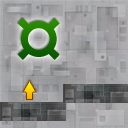
<style>
.page{position:relative;width:128px;height:128px}
.page>*{position:absolute;margin:0}
.t1{font:82px "TrebuchetMS-Bold";color:#187f00}
</style>
<div class="page">
<p class="t1" style="left:17px;top:18px;width:43px;height:42px">¤</p>
</div>
